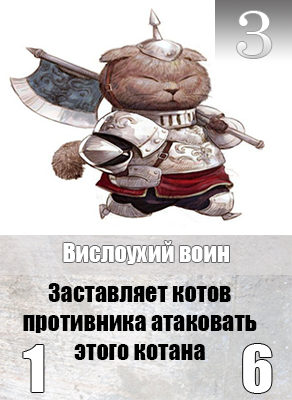
<style>
.page{position:relative;width:292px;height:400px;background:#ffffff}
.page>*{position:absolute;margin:0}
.t1{font:65.6px "Century";color:#ffffff;scale:1.18 1}
.t2{font:24px "Impact";color:#ffffff}
.t3{font:24px "Impact";color:#000000}
</style>
<div class="page">
<p class="t1" style="left:237px;top:11px;width:35px;height:47px">3</p>
<p class="t2" style="left:63px;top:241px;width:166px;height:23px">Вислоухий воин</p>
<p class="t3" style="left:23px;top:283px;width:234px;height:77px;text-align:center">Заставляет котов противника атаковать этого котана</p>
</div>
